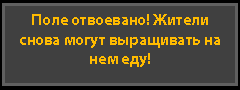
<style>
.page{position:relative;width:240px;height:90px;background:#404040}
.page>*{position:absolute;margin:0}
.t1{font:16px "MyriadPro-Bold";color:#ffbb00}
</style>
<div class="page">
<p class="t1" style="left:20px;top:14px;width:200px;height:53px;text-align:center">Поле отвоевано! Жители снова могут выращивать на нем еду!</p>
</div>
